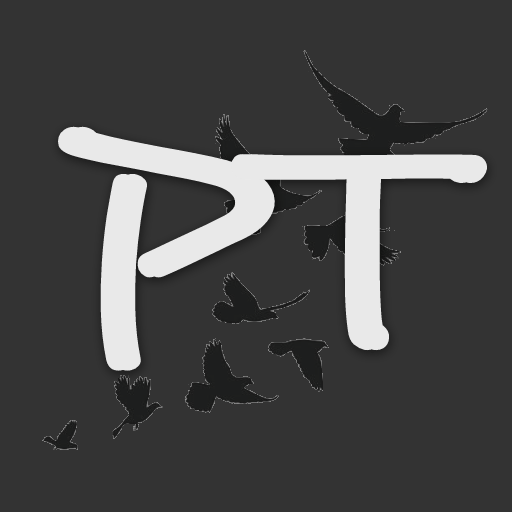
<style>
.page{position:relative;width:512px;height:512px;background:#333333}
.page>*{position:absolute;margin:0}
.t1{font:337.4px "Desyrel";color:#e9e9e9;font-weight:bold}
</style>
<div class="page">
<p class="t1" style="left:57px;top:126px;width:431px;height:246px">PT</p>
</div>
